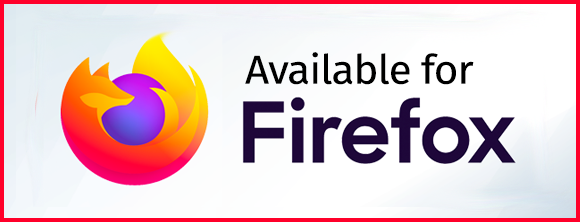
<style>
.page{position:relative;width:580px;height:222px}
.page>*{position:absolute;margin:0}
.t1{font:40.4px "FiraSans-Regular";letter-spacing:-0.02em;color:#000000;scale:1.04 1}
</style>
<div class="page">
<p class="t1" style="left:245px;top:52px;width:229px;height:33px">Available for</p>
</div>
